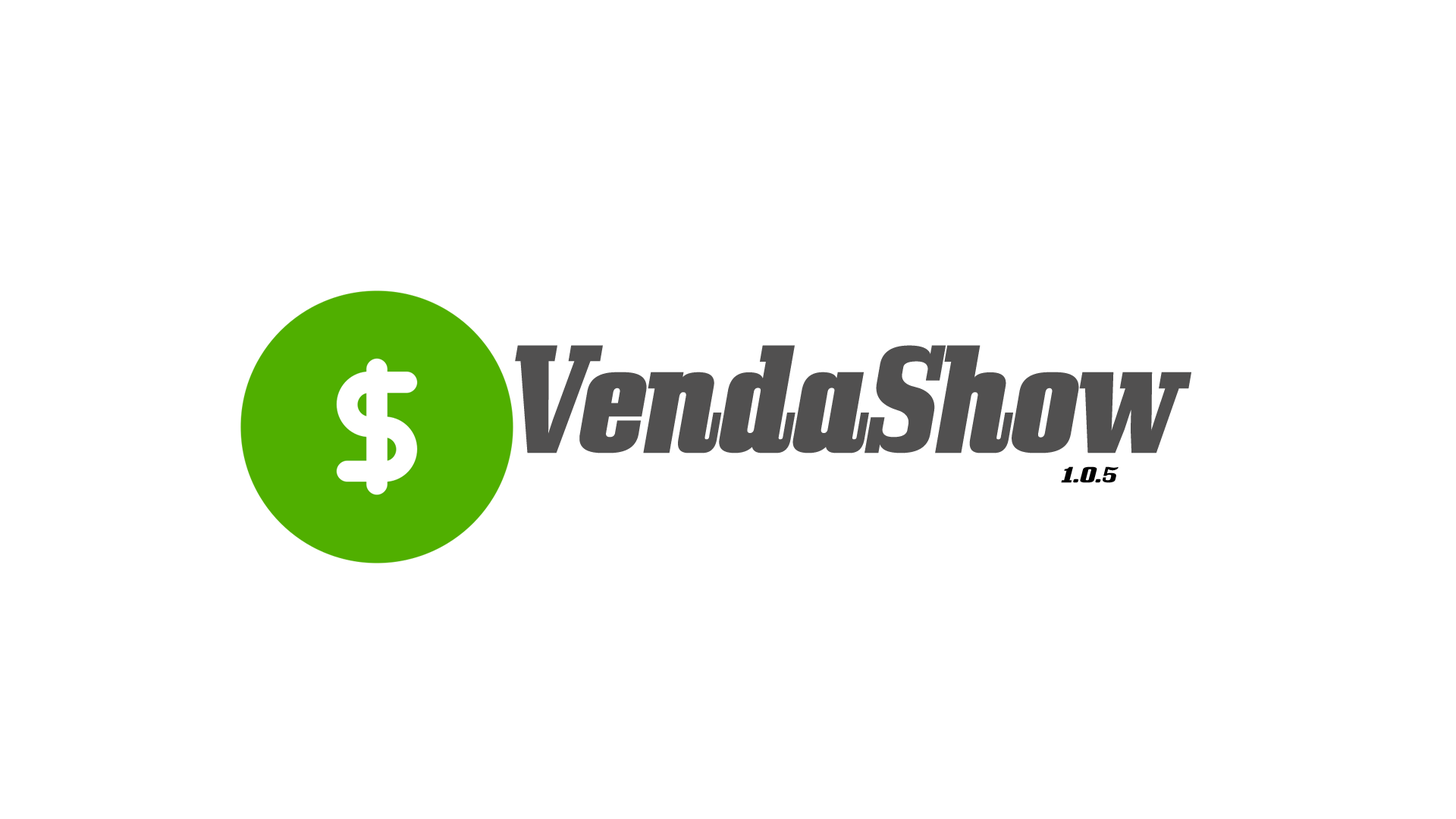
<style>
.page{position:relative;width:1456px;height:819px;background:#ffffff}
.page>*{position:absolute;margin:0}
.t1{font:134.1px "Bullpen-Italic";letter-spacing:-0.025em;color:#515050}
.t2{font:134.1px "Bullpen-Italic";letter-spacing:-0.025em;color:#515050;font-variant:small-caps}
.t3{font:19.5px "Bullpen-Italic";letter-spacing:-0.025em;color:#000000;scale:1.46 1}
</style>
<div class="page">
<p class="t1" style="left:515px;top:345px;width:676px;height:108px"><span class="t2">V</span>endaShow</p>
<p class="t3" style="left:1061px;top:466px;width:58px;height:17px">1.0.5</p>
</div>
